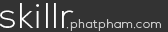
<style>
.page{position:relative;width:168px;height:32px;background:#333333}
.page>*{position:absolute;margin:0}
.t1{font:35px "NexaLight";letter-spacing:0.05em;color:#ffffff}
.t2{font:12px "NexaLight";letter-spacing:0.05em;color:#cccccc}
</style>
<div class="page">
<p class="t1" style="left:0px;top:3px;width:74px;height:25px">skillr</p>
<p class="t2" style="left:66px;top:19px;width:95px;height:12px">.phatpham.com</p>
</div>
